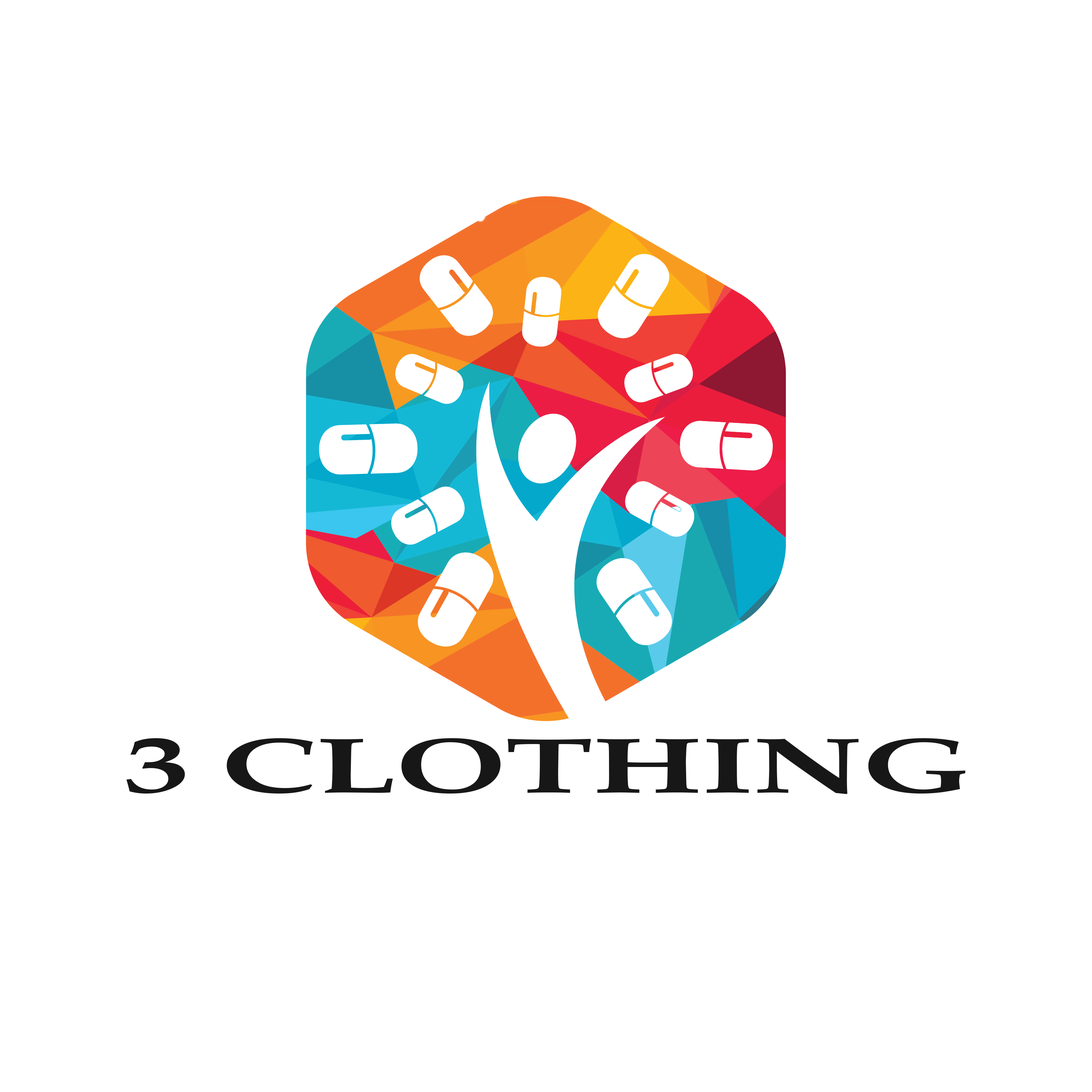
<style>
.page{position:relative;width:1092px;height:1092px;background:#ffffff}
.page>*{position:absolute;margin:0}
.t1{font:78.6px "BookAntiqua-Bold";color:#181718;scale:1.67 1}
</style>
<div class="page">
<p class="t1" style="left:126px;top:738px;width:839px;height:56px">3 CLOTHING</p>
</div>
